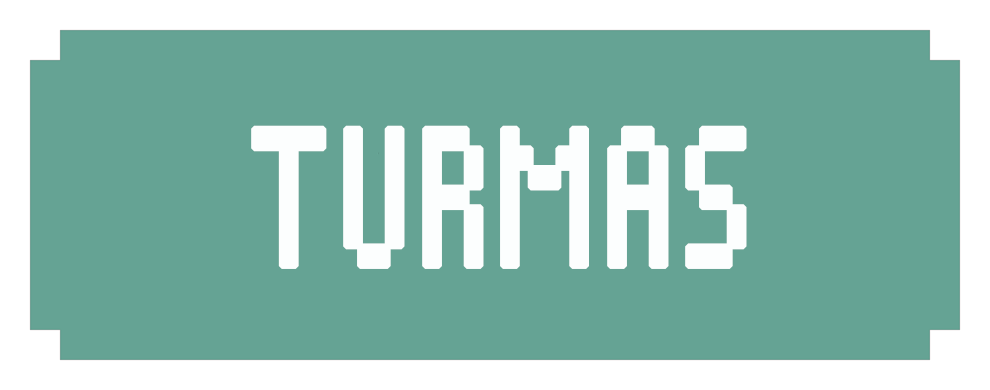
<style>
.page{position:relative;width:990px;height:390px;background:#65a394}
.page>*{position:absolute;margin:0}
.t1{font:255px "Pixelade";letter-spacing:0.025em;color:#fcfefe;font-weight:bold;scale:0.71 1}
</style>
<div class="page">
<p class="t1" style="left:251px;top:125px;width:496px;height:144px">TURMAS</p>
</div>
